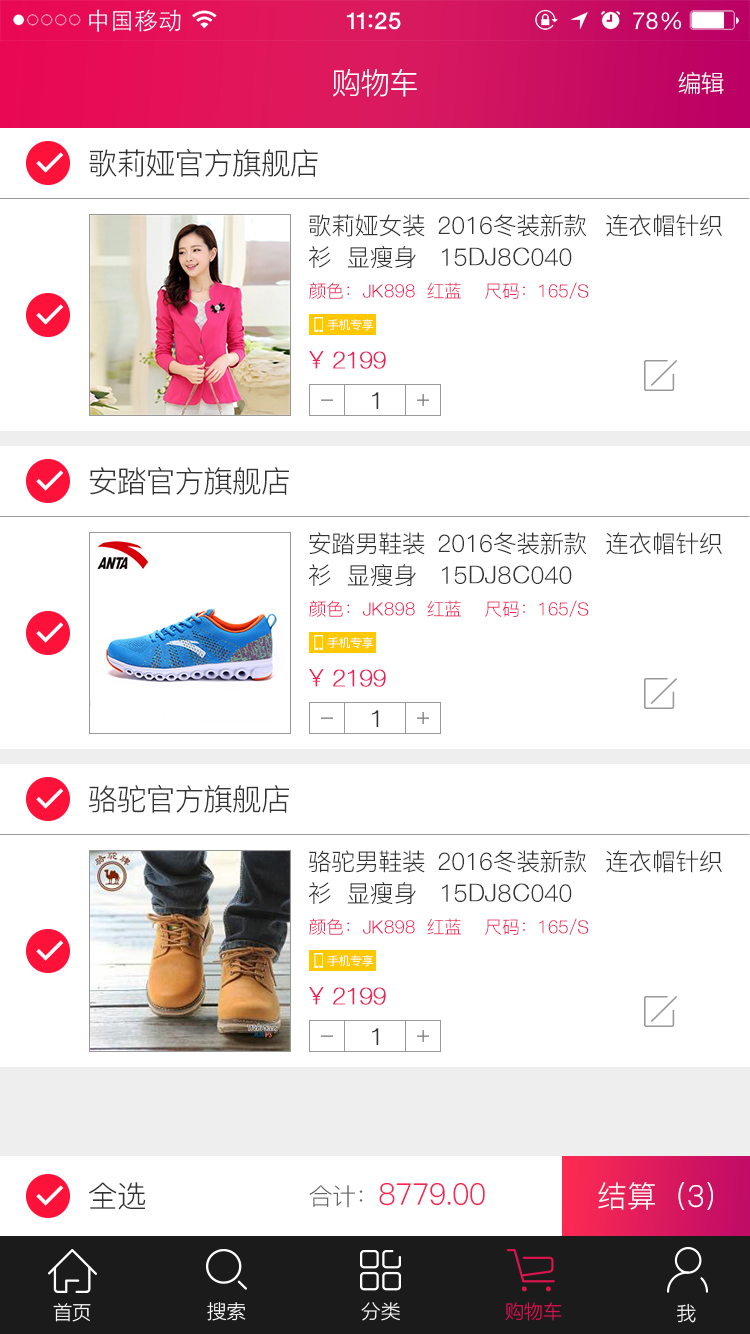
<style>
.page{position:relative;width:750px;height:1334px;background:#ffffff}
.page>*{position:absolute;margin:0}
.t1{font:30px "PingFang-SC-Regular";letter-spacing:-0.04em;color:#ffffff}
.t2{font:24px "PingFang-SC-Regular";letter-spacing:-0.04em;color:#ffffff}
.t3{font:30px "PingFang-SC-Regular";letter-spacing:-0.04em;color:#333333}
.t4{font:24px/48px "PingFang-SC-Regular";letter-spacing:-0.02em;color:#333333}
.t5{font:24px "HelveticaNeueLTPro-Th";letter-spacing:-0.02em;color:#333333;font-weight:bold}
.t6{font:18px "PingFang-SC-Regular";letter-spacing:-0.02em;color:#ec2258}
.t7{font:18px "HelveticaNeueLTPro-Th";letter-spacing:-0.02em;color:#ec2258;font-weight:bold}
.t8{font:12px "PingFang-SC-Medium";letter-spacing:-0.04em;color:#fffefe}
.t9{font:24px "HelveticaNeueLTPro-Th";letter-spacing:-0.02em;color:#ec2258;font-weight:bold}
.t10{font:30px "PingFang-SC-Regular";color:#fefefe}
.t11{font:30px "PingFang-SC-Regular";letter-spacing:-0.04em;color:#f82854}
.t12{font:24px "PingFang-SC-Regular";letter-spacing:-0.04em;color:#666666}
</style>
<div class="page">
<p class="t1" style="left:333px;top:69px;width:84px;height:28px">购物车</p>
<p class="t2" style="left:678px;top:71px;width:46px;height:23px">编辑</p>
<p class="t3" style="left:89px;top:149px;width:229px;height:28px">歌莉娅官方旗舰店</p>
<p class="t4" style="left:308px;top:214px;width:414px;height:54px">歌莉娅女装 2016冬装新款  连衣帽针织<br>衫  显瘦身   15    8   040</p>
<p class="t5" style="left:469px;top:247px;width:61px;height:19px">DJ   C</p>
<p class="t6" style="left:309px;top:282px;width:268px;height:17px">颜色：    898  红蓝    尺码：165/</p>
<p class="t7" style="left:363px;top:284px;width:226px;height:14px">JK                                      S</p>
<p class="t8" style="left:327px;top:319px;width:47px;height:12px">手机专享</p>
<p class="t9" style="left:309px;top:351px;width:77px;height:18px">¥ 2199</p>
<p class="t5" style="left:372px;top:392px;width:7px;height:17px">1</p>
<p class="t3" style="left:89px;top:467px;width:200px;height:28px">安踏官方旗舰店</p>
<p class="t4" style="left:308px;top:532px;width:414px;height:54px">安踏男鞋装 2016冬装新款  连衣帽针织<br>衫  显瘦身   15    8   040</p>
<p class="t5" style="left:469px;top:565px;width:61px;height:19px">DJ   C</p>
<p class="t6" style="left:309px;top:600px;width:268px;height:17px">颜色：    898  红蓝    尺码：165/</p>
<p class="t7" style="left:363px;top:602px;width:226px;height:14px">JK                                      S</p>
<p class="t8" style="left:327px;top:637px;width:47px;height:12px">手机专享</p>
<p class="t9" style="left:309px;top:669px;width:77px;height:18px">¥ 2199</p>
<p class="t5" style="left:372px;top:710px;width:7px;height:17px">1</p>
<p class="t3" style="left:88px;top:785px;width:201px;height:28px">骆驼官方旗舰店</p>
<p class="t4" style="left:308px;top:850px;width:414px;height:54px">骆驼男鞋装 2016冬装新款  连衣帽针织<br>衫  显瘦身   15    8   040</p>
<p class="t5" style="left:469px;top:883px;width:61px;height:19px">DJ   C</p>
<p class="t6" style="left:309px;top:918px;width:268px;height:17px">颜色：    898  红蓝    尺码：165/</p>
<p class="t7" style="left:363px;top:920px;width:226px;height:14px">JK                                      S</p>
<p class="t8" style="left:327px;top:955px;width:47px;height:12px">手机专享</p>
<p class="t9" style="left:309px;top:987px;width:77px;height:18px">¥ 2199</p>
<p class="t5" style="left:372px;top:1028px;width:7px;height:17px">1</p>
<p class="t3" style="left:89px;top:1182px;width:57px;height:28px">全选</p>
<p class="t10" style="left:598px;top:1182px;width:115px;height:28px">结算（3）</p>
<p class="t11" style="left:309px;top:1183px;width:176px;height:25px"><span class="t12">合计：</span>8779.00</p>
</div>
